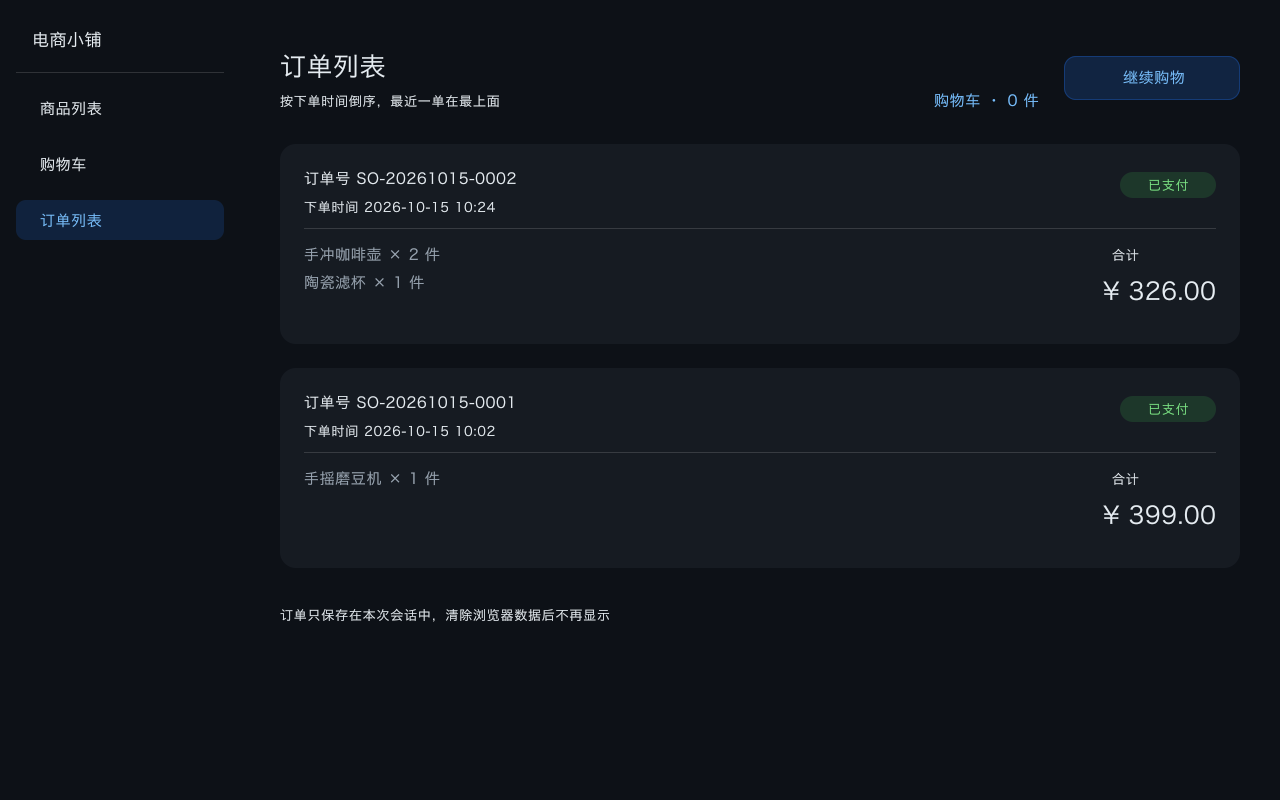
<style>
.page{position:relative;width:1280px;height:800px;background:#0d1117}
.page>*{position:absolute;margin:0}
.t1{font:17px "HiraginoSansGB-Regular";letter-spacing:0.03em;color:#e6edf3}
.t2{font:26px "HiraginoSansGB-Regular";letter-spacing:0.02em;color:#e6edf3}
.t3{font:15px "HiraginoSansGB-Regular";letter-spacing:0.04em;color:#79c0ff}
.t4{font:15px "HiraginoSansGB-Regular";letter-spacing:0.04em;color:#e6edf3}
.t5{font:13px "HiraginoSansGB-Regular";letter-spacing:0.06em;color:#e6edf3}
.t6{font:13px "HiraginoSansGB-Regular";letter-spacing:0.06em;color:#7ee787}
.t7{font:15px "HiraginoSansGB-Regular";letter-spacing:0.04em;color:#9ba7b4}
.t8{font:24px "HiraginoSansGB-Regular";letter-spacing:0.022em;color:#e6edf3}
</style>
<div class="page">
<p class="t1" style="left:33px;top:31px;width:69px;height:18px">电商小铺</p>
<p class="t2" style="left:280px;top:54px;width:106px;height:24px">订单列表</p>
<p class="t3" style="left:1122px;top:70px;width:63px;height:16px">继续购物</p>
<p class="t4" style="left:39px;top:101px;width:64px;height:16px">商品列表</p>
<p class="t5" style="left:279px;top:95px;width:221px;height:14px">按下单时间倒序，最近一单在最上面</p>
<p class="t3" style="left:933px;top:93px;width:107px;height:16px">购物车 · 0 件</p>
<p class="t4" style="left:39px;top:157px;width:48px;height:16px">购物车</p>
<p class="t4" style="left:303px;top:171px;width:214px;height:16px">订单号 SO-20261015-0002</p>
<p class="t6" style="left:1148px;top:179px;width:41px;height:13px">已支付</p>
<p class="t5" style="left:303px;top:201px;width:193px;height:13px">下单时间 2026-10-15 10:24</p>
<p class="t3" style="left:39px;top:213px;width:64px;height:16px">订单列表</p>
<p class="t7" style="left:303px;top:247px;width:138px;height:16px">手冲咖啡壶 × 2 件</p>
<p class="t5" style="left:1111px;top:248px;width:29px;height:14px">合计</p>
<p class="t7" style="left:304px;top:275px;width:121px;height:16px">陶瓷滤杯 × 1 件</p>
<p class="t8" style="left:1102px;top:281px;width:114px;height:21px">¥ 326.00</p>
<p class="t4" style="left:303px;top:395px;width:211px;height:16px">订单号 SO-20261015-0001</p>
<p class="t6" style="left:1148px;top:403px;width:41px;height:13px">已支付</p>
<p class="t5" style="left:303px;top:425px;width:193px;height:13px">下单时间 2026-10-15 10:02</p>
<p class="t7" style="left:303px;top:471px;width:138px;height:16px">手摇磨豆机 × 1 件</p>
<p class="t5" style="left:1111px;top:472px;width:29px;height:14px">合计</p>
<p class="t8" style="left:1102px;top:505px;width:114px;height:21px">¥ 399.00</p>
<p class="t5" style="left:279px;top:608px;width:332px;height:15px">订单只保存在本次会话中，清除浏览器数据后不再显示</p>
</div>
